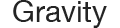
<style>
.page{position:relative;width:120px;height:28px;background:#ffffff}
.page>*{position:absolute;margin:0}
.t1{font:30px "HelveticaNeue";color:#242424}
</style>
<div class="page">
<p class="t1" style="left:13px;top:0px;width:94px;height:28px">Gravity</p>
</div>
